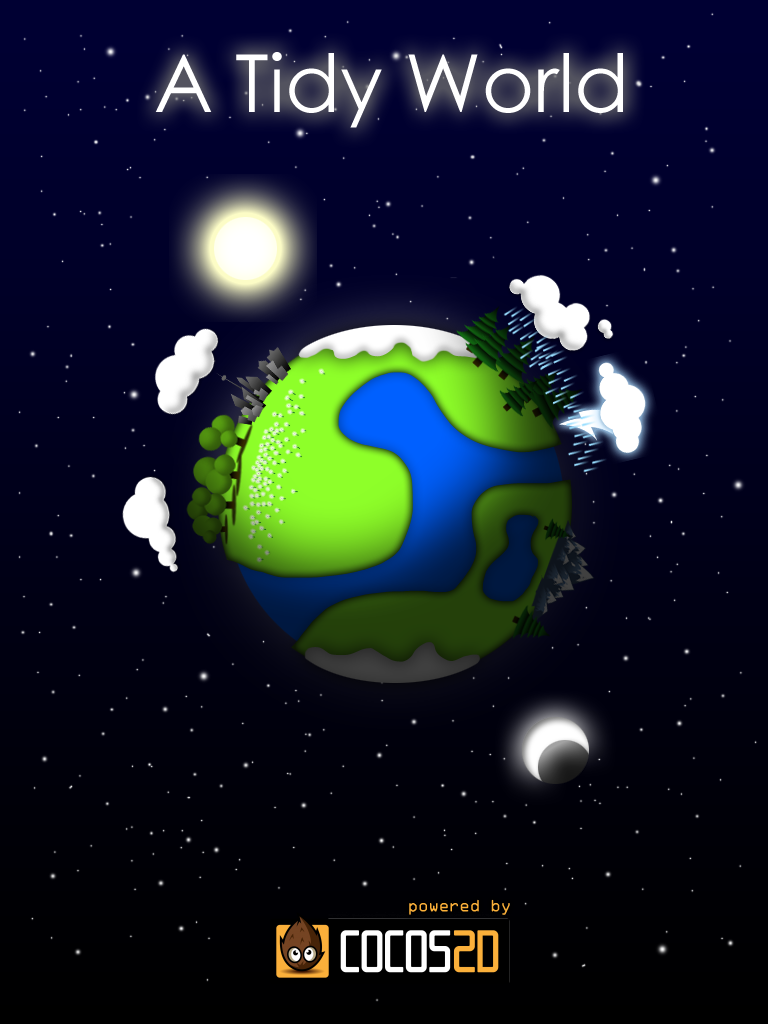
<style>
.page{position:relative;width:768px;height:1024px}
.page>*{position:absolute;margin:0}
.t1{font:80px "CenturyGothic";color:#ffffff}
.t2{font:16px "OCRAStd";letter-spacing:-0.075em;color:#fbb03a}
</style>
<div class="page">
<p class="t1" style="left:155px;top:52px;width:468px;height:76px">A Tidy World</p>
<p class="t2" style="left:409px;top:899px;width:101px;height:16px">powered by</p>
</div>
